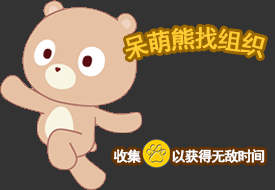
<style>
.page{position:relative;width:275px;height:190px;background:#333333}
.page>*{position:absolute;margin:0}
.t1{font:24px "SimHei";letter-spacing:-0.08em;color:#ffcc33;font-weight:bold}
.t2{font:14px "SimHei";letter-spacing:-0.08em;color:#ffffff;font-weight:bold}
</style>
<div class="page">
<p class="t1" style="left:125px;top:26px;width:140px;height:34px">呆萌熊找组织</p>
<p class="t2" style="left:113px;top:149px;width:152px;height:14px">收集     以获得无敌时间</p>
</div>
